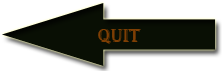
<style>
.page{position:relative;width:222px;height:71px;background:#ffffff}
.page>*{position:absolute;margin:0}
.t1{font:20px "Algerian";color:#7e3e04}
</style>
<div class="page">
<p class="t1" style="left:98px;top:29px;width:43px;height:15px">Quit</p>
</div>
